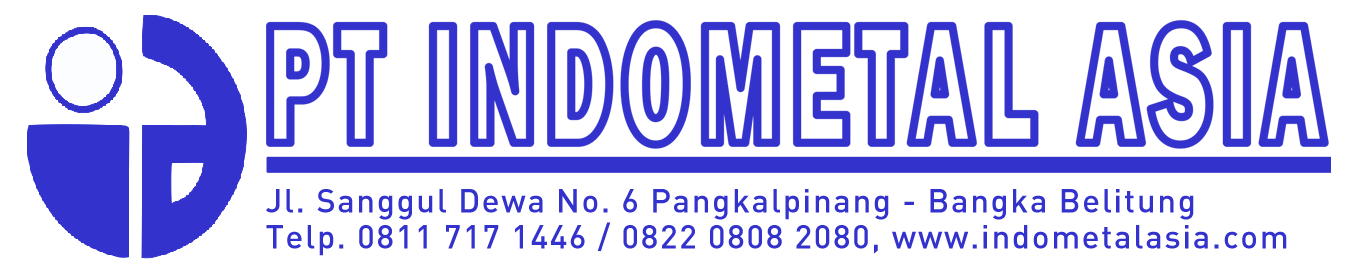
<style>
.page{position:relative;width:1364px;height:277px;background:#ffffff}
.page>*{position:absolute;margin:0}
.t1{font:33px/36px "DIN-Medium";letter-spacing:0.05em;color:#3332cc}
</style>
<div class="page">
<p class="t1" style="left:266px;top:189px;width:1021px;height:67px">Jl. Sanggul Dewa No. 6 Pangkalpinang - Bangka Belitung<br>Telp. 0811 717 1446 / 0822 0808 2080, www.indometalasia.com</p>
</div>
